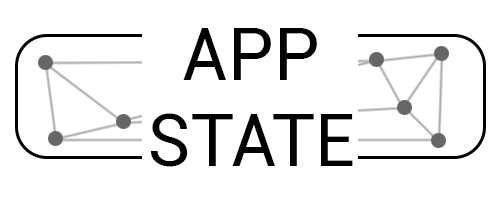
<style>
.page{position:relative;width:500px;height:200px;background:#ffffff}
.page>*{position:absolute;margin:0}
.t1{font:72px "Roboto-Regular";color:#000000}
</style>
<div class="page">
<p class="t1" style="left:151px;top:28px;width:202px;height:139px;text-align:center">APP<br>STATE</p>
</div>
